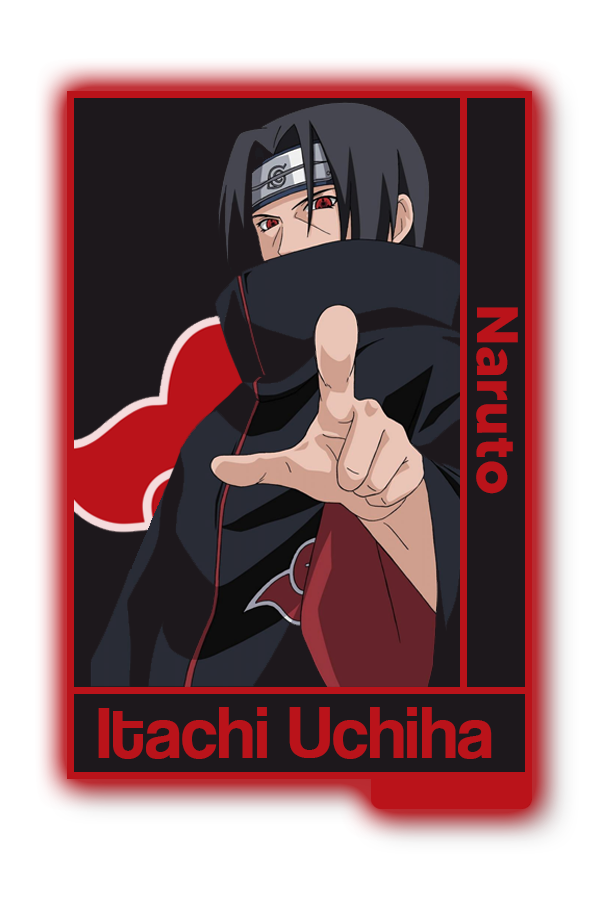
<style>
.page{position:relative;width:600px;height:900px;background:#1d181c}
.page>*{position:absolute;margin:0}
.t1{font:58.4px "MADETOMMY-Bold";color:#ba131a}
.t2{font:75px "CoolveticaRg-Regular";color:#ba131a}
</style>
<div class="page">
<p class="t1" style="left:476px;top:307px;width:42px;height:187px;rotate:90deg">Naruto</p>
<p class="t2" style="left:98px;top:707px;width:394px;height:52px">Itachi Uchiha</p>
</div>
